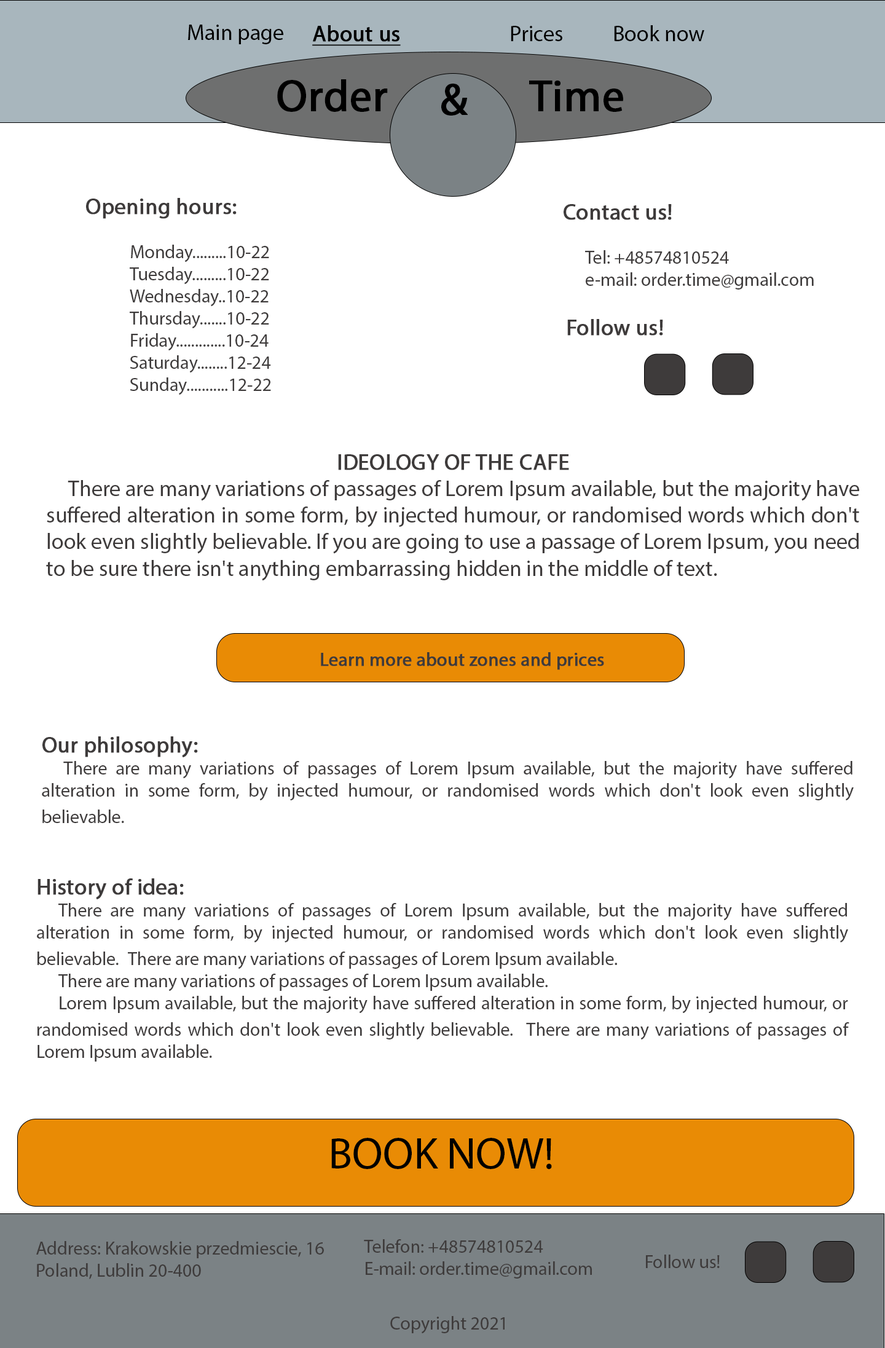
<style>
.page{position:relative;width:885px;height:1348px;background:#ffffff}
.page>*{position:absolute;margin:0}
.t1{font:22.1px "MyriadPro-Regular";color:#000000}
.t2{font:22.1px "MyriadPro-Regular";color:#000000;font-weight:bold;text-decoration:underline}
.t3{font:44.2px "MyriadPro-Regular";color:#000000;font-weight:bold}
.t4{font:18.4px "MyriadPro-Regular";color:#3e3b3b}
.t5{font:22.1px "MyriadPro-Regular";color:#3e3b3b;font-weight:bold}
.t6{font:22.1px "MyriadPro-Regular";color:#3e3b3b}
.t7{font:18.4px "MyriadPro-Regular";color:#3e3b3b;font-weight:bold}
.t8{font:44.2px "MyriadPro-Regular";color:#000000}
</style>
<div class="page">
<p class="t1" style="left:188px;top:25px;width:95px;height:19px">Main page</p>
<p class="t2" style="left:312px;top:25px;width:89px;height:21px">About us</p>
<p class="t1" style="left:511px;top:26px;width:51px;height:15px">Prices</p>
<p class="t1" style="left:614px;top:25px;width:90px;height:16px">Book now</p>
<p class="t3" style="left:277px;top:79px;width:111px;height:33px">Order</p>
<p class="t3" style="left:441px;top:84px;width:27px;height:32px">&amp;</p>
<p class="t3" style="left:529px;top:80px;width:94px;height:32px">Time</p>
<p class="t4" style="left:86px;top:198px;width:185px;height:197px;text-align:justify"><span class="t5">Opening hours:<br></span><br>  Monday.........10-22<br>  Tuesday.........10-22<br>  Wednesday..10-22<br>  Thursday.......10-22<br>  Friday.............10-24<br>  Saturday........12-24<br>  Sunday...........12-22</p>
<p class="t4" style="left:563px;top:204px;width:251px;height:85px;text-align:justify"><span class="t5">Contact us!<br></span><br> Tel: +48574810524<br> e-mail: order.time@gmail.com</p>
<p class="t5" style="left:567px;top:319px;width:96px;height:17px">Follow us!</p>
<p class="t6" style="left:46px;top:454px;width:813px;height:127px;text-align:justify"><span class="t5">IDEOLOGY OF THE CAFE<br></span> There are many variations of passages of Lorem Ipsum available, but the majority have suffered alteration in some form, by injected humour, or randomised words which don't look even slightly believable. If you are going to use a passage of Lorem Ipsum, you need to be sure there isn't anything embarrassing hidden in the middle of text.</p>
<p class="t7" style="left:321px;top:652px;width:283px;height:18px">Learn more about zones and prices</p>
<p class="t4" style="left:42px;top:736px;width:812px;height:87px;text-align:justify"><span class="t5">Our philosophy:<br></span> There are many variations of passages of Lorem Ipsum available, but the majority have suffered alteration in some form, by injected humour, or randomised words which don't look even slightly believable.</p>
<p class="t4" style="left:37px;top:878px;width:812px;height:183px;text-align:justify"><span class="t5">History of idea:<br></span> There are many variations of passages of Lorem Ipsum available, but the majority have suffered alteration in some form, by injected humour, or randomised words which don't look even slightly believable.  There are many variations of passages of Lorem Ipsum available.<br> There are many variations of passages of Lorem Ipsum available.<br> Lorem Ipsum available, but the majority have suffered alteration in some form, by injected humour, or randomised words which don't look even slightly believable.  There are many variations of passages of Lorem Ipsum available.</p>
<p class="t8" style="left:331px;top:1137px;width:221px;height:32px">BOOK NOW!</p>
<p class="t4" style="left:36px;top:1241px;width:288px;height:38px;text-align:justify">Address: Krakowskie przedmiescie, 16<br>Poland, Lublin 20-400</p>
<p class="t4" style="left:364px;top:1239px;width:228px;height:39px;text-align:justify">Telefon: +48574810524<br>E-mail: order.time@gmail.com</p>
<p class="t4" style="left:646px;top:1254px;width:74px;height:14px">Follow us!</p>
<p class="t4" style="left:390px;top:1316px;width:114px;height:17px">Copyright 2021</p>
</div>
